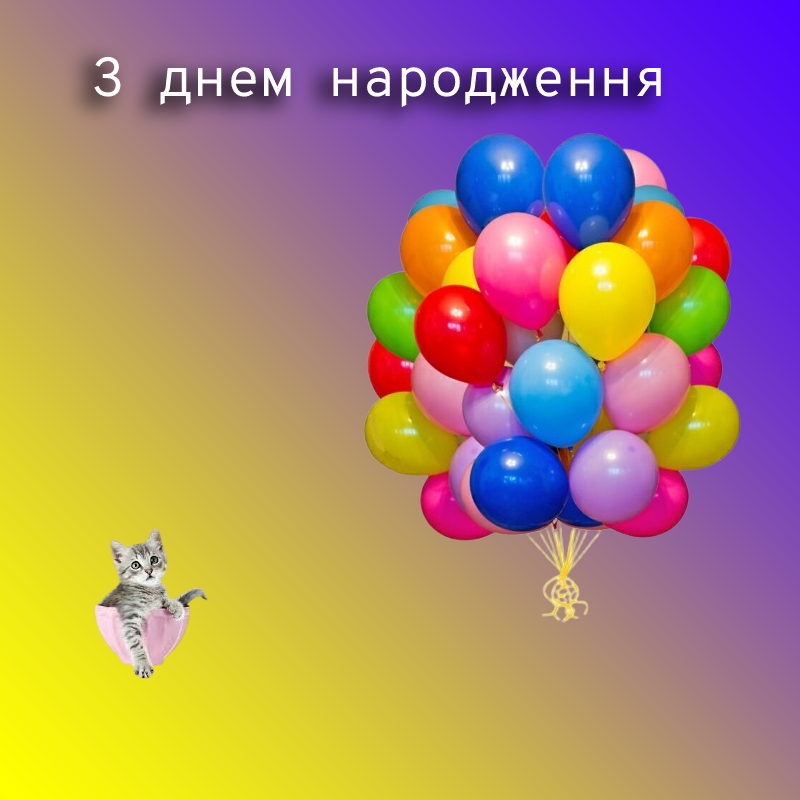
<style>
.page{position:relative;width:800px;height:800px}
.page>*{position:absolute;margin:0}
.t1{font:55px "OverpassMono-Regular";color:#ffffff}
</style>
<div class="page">
<p class="t1" style="left:94px;top:56px;width:567px;height:52px">З днем народження</p>
</div>
